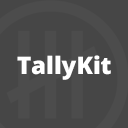
<style>
.page{position:relative;width:128px;height:128px;background:#464646}
.page>*{position:absolute;margin:0}
.t1{font:24px "OpenSans-Extrabold";color:#ffffff}
</style>
<div class="page">
<p class="t1" style="left:17px;top:55px;width:94px;height:25px">TallyKit</p>
</div>
